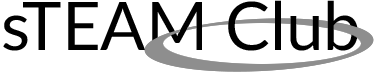
<style>
.page{position:relative;width:374px;height:74px;background:#ffffff}
.page>*{position:absolute;margin:0}
.t1{font:67px "Lato-Regular";color:#000000}
</style>
<div class="page">
<p class="t1" style="left:3px;top:0px;width:355px;height:51px">sTEAM Club</p>
</div>
